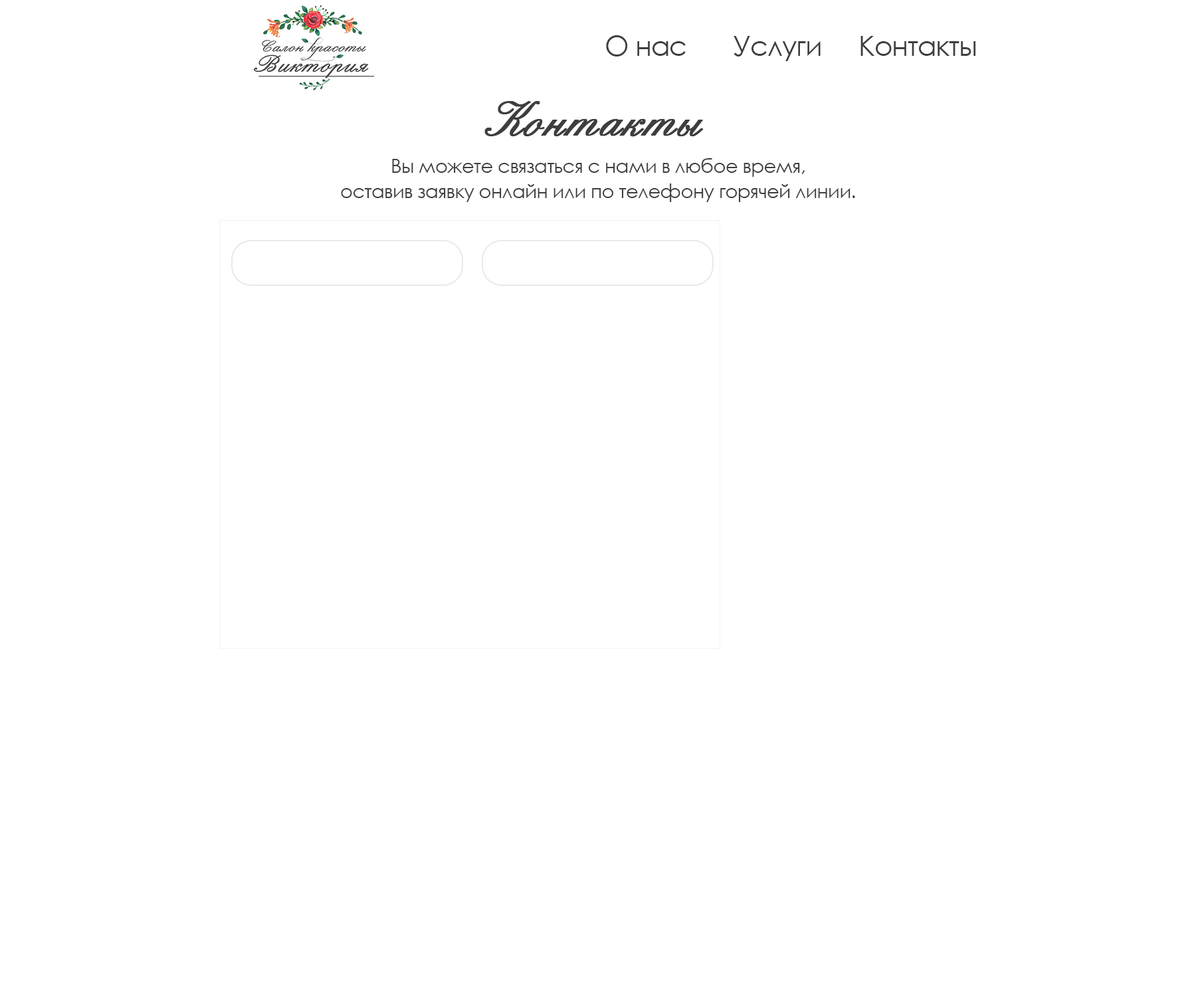
<style>
.page{position:relative;width:1196px;height:997px;background:#ffffff}
.page>*{position:absolute;margin:0}
.t1{font:27.7px "CenturyGothic";letter-spacing:-0.025em;color:#3e3e3e}
.t2{font:52.6px "English157BT-Regular";color:#3e3e3e;font-weight:bold}
.t3{font:19.4px/24.9px "CenturyGothic";letter-spacing:-0.025em;color:#3e3e3e}
</style>
<div class="page">
<p class="t1" style="left:606px;top:35px;width:80px;height:21px">О нас</p>
<p class="t1" style="left:734px;top:36px;width:87px;height:25px">Услуги</p>
<p class="t1" style="left:861px;top:36px;width:115px;height:20px">Контакты</p>
<p class="t2" style="left:484px;top:101px;width:220px;height:36px">Контакты</p>
<p class="t3" style="left:341px;top:158px;width:514px;height:44px;text-align:center">Вы можете связаться с нами в любое время,<br>оставив заявку онлайн или по телефону горячей линии.</p>
</div>
